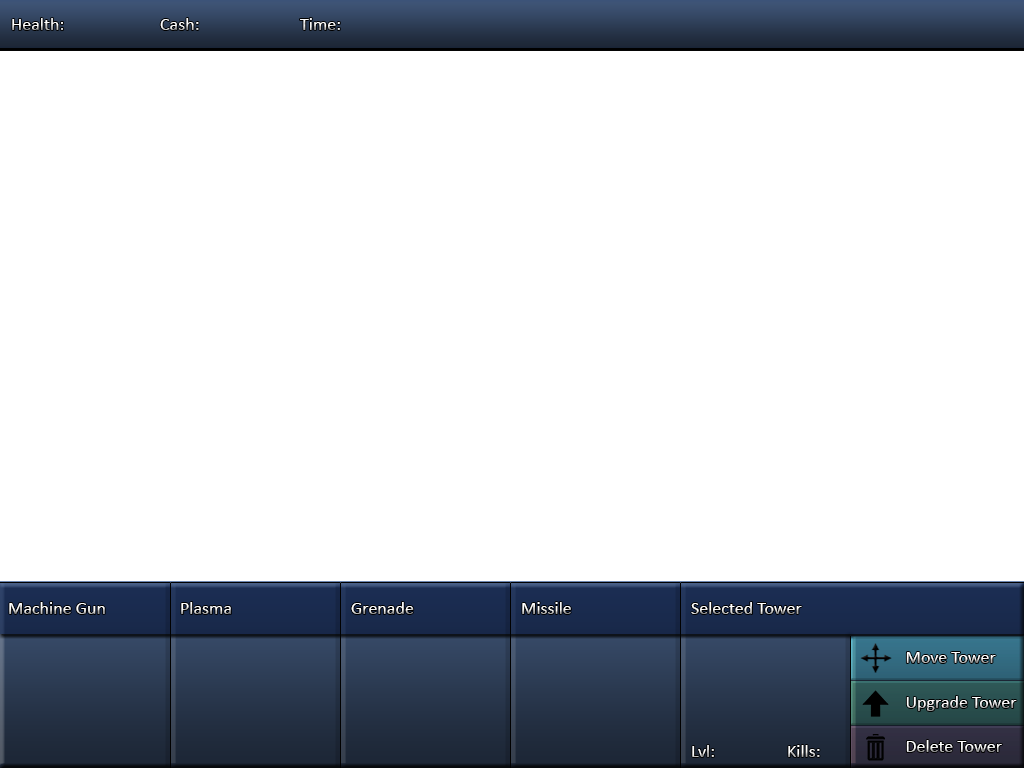
<style>
.page{position:relative;width:1024px;height:768px;background:#ffffff}
.page>*{position:absolute;margin:0}
.t1{font:18px "Calibri";color:#ffffff}
.t2{font:18px "Calibri"}
</style>
<div class="page">
<p class="t1" style="left:12px;top:18px;width:51px;height:12px">Health:</p>
<p class="t2" style="left:160px;top:18px;width:39px;height:12px">Cash:</p>
<p class="t1" style="left:300px;top:18px;width:40px;height:12px">Time:</p>
<p class="t1" style="left:9px;top:602px;width:96px;height:12px">Machine Gun</p>
<p class="t1" style="left:181px;top:602px;width:50px;height:12px">Plasma</p>
<p class="t2" style="left:351px;top:602px;width:63px;height:12px">Grenade</p>
<p class="t1" style="left:522px;top:602px;width:49px;height:12px">Missile</p>
<p class="t1" style="left:691px;top:602px;width:111px;height:12px">Selected Tower</p>
<p class="t1" style="left:906px;top:652px;width:90px;height:11px">Move Tower</p>
<p class="t1" style="left:906px;top:696px;width:111px;height:15px">Upgrade Tower</p>
<p class="t1" style="left:692px;top:745px;width:22px;height:12px">Lvl:</p>
<p class="t1" style="left:788px;top:745px;width:32px;height:12px">Kills:</p>
<p class="t1" style="left:906px;top:740px;width:96px;height:12px">Delete Tower</p>
</div>
